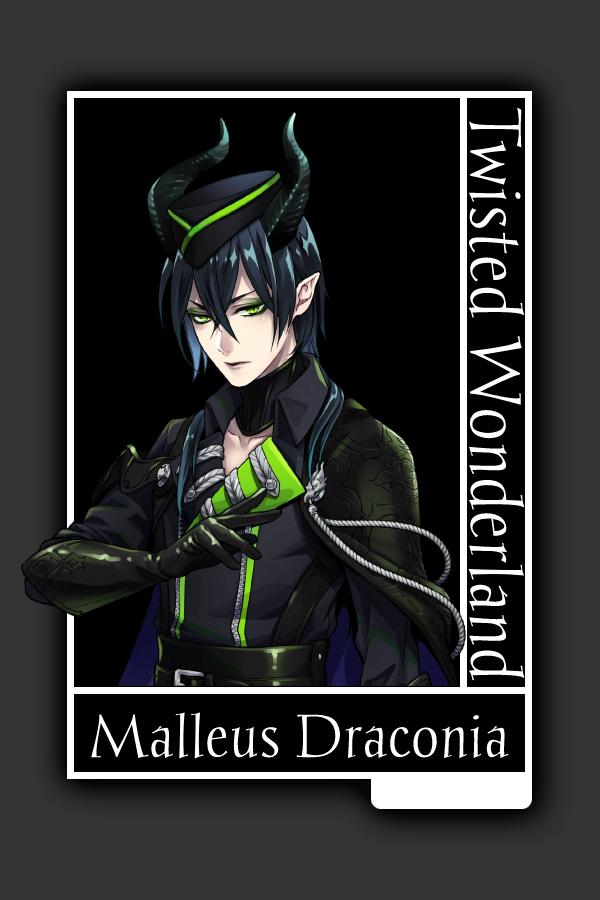
<style>
.page{position:relative;width:600px;height:900px;background:#000000}
.page>*{position:absolute;margin:0}
.t1{font:60px "Chantelli-Antiqua";color:#ffffff}
.t2{font:50px "Chantelli-Antiqua";color:#ffffff}
</style>
<div class="page">
<p class="t1" style="left:468px;top:107px;width:57px;height:574px;rotate:90deg">Twisted Wonderland</p>
<p class="t2" style="left:91px;top:712px;width:418px;height:47px">Malleus Draconia</p>
</div>
